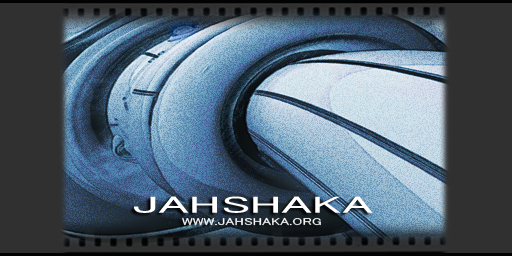
<style>
.page{position:relative;width:512px;height:256px;background:#303030}
.page>*{position:absolute;margin:0}
.t1{font:24px "MS-UIGothic";color:#ffffff;scale:2.04 1}
.t2{font:10px "MS-UIGothic";color:#ffffff;scale:1.46 1}
</style>
<div class="page">
<p class="t1" style="left:134px;top:196px;width:239px;height:17px">JAHSHAKA</p>
<p class="t2" style="left:182px;top:217px;width:139px;height:9px">WWW.JAHSHAKA.ORG</p>
</div>
